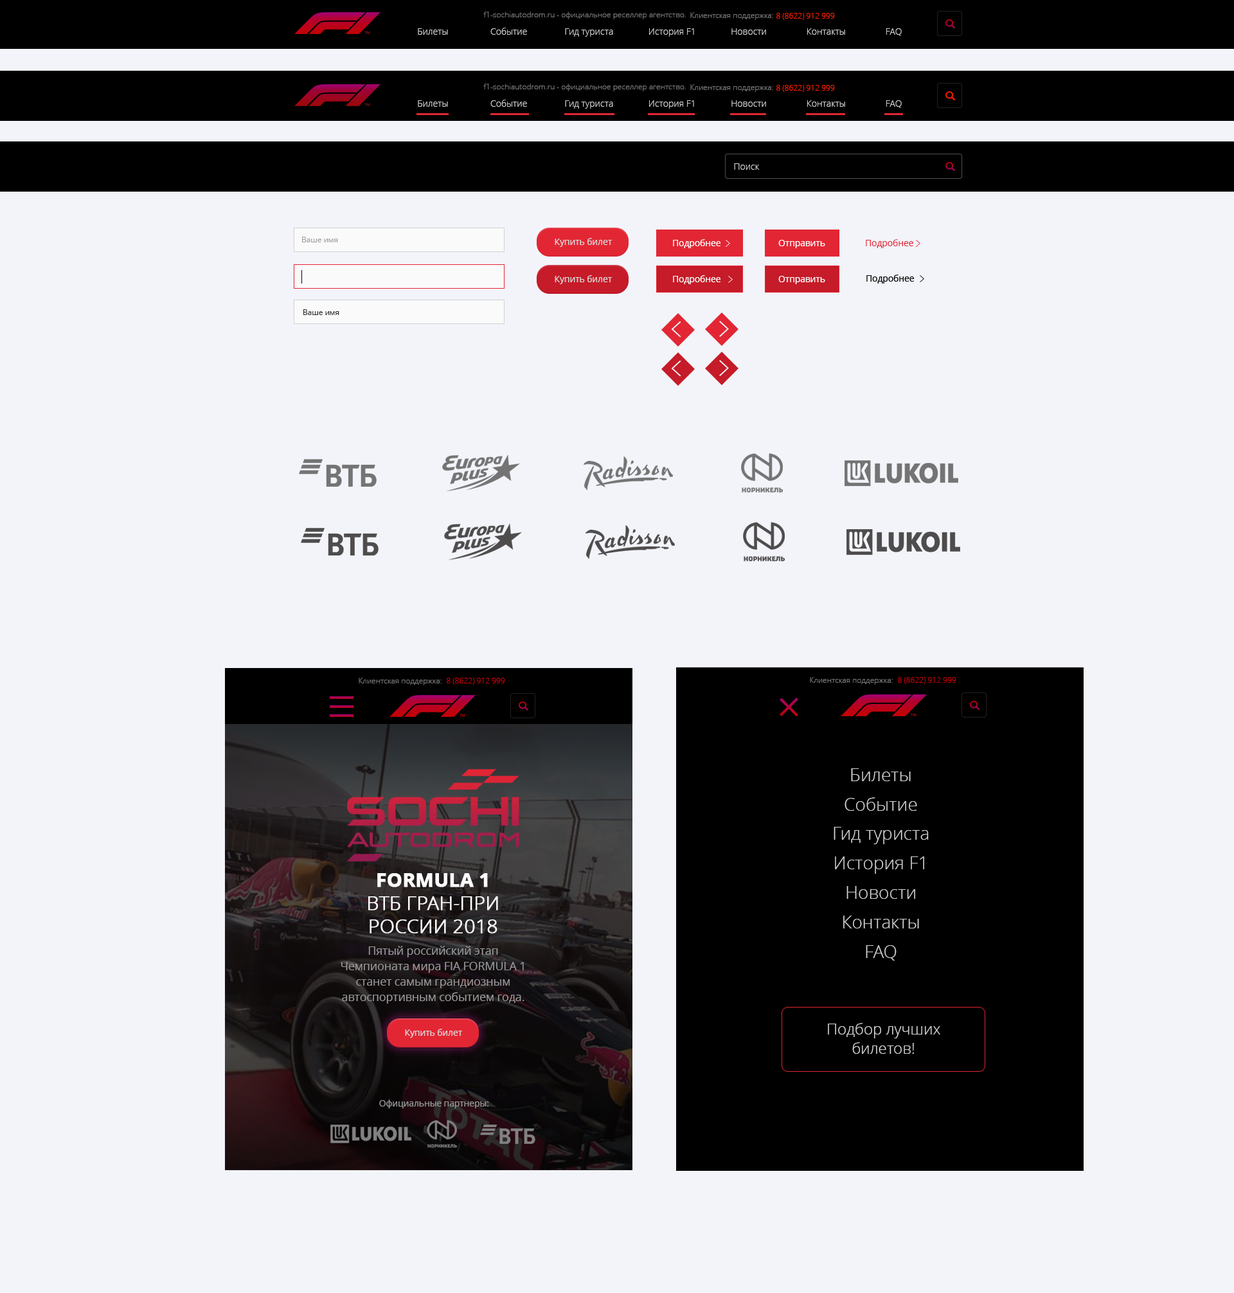
<style>
.page{position:relative;width:1234px;height:1293px;background:#f2f4fa}
.page>*{position:absolute;margin:0}
.t1{font:7.7px "OpenSans-Light";color:#777677}
.t2{font:7.7px "OpenSans-Light";color:#ff1e00}
.t3{font:9px "OpenSans-Light";color:#d3d3d3}
.t4{font:7.7px "OpenSans";letter-spacing:-0.01em;color:#a1a2a4}
.t5{font:9px "OpenSans";letter-spacing:-0.01em;color:#d9d9d9}
.t6{font:9px "OpenSans";letter-spacing:-0.01em;color:#ffffff}
.t7{font:9px "OpenSans";letter-spacing:-0.01em;color:#e32634}
.t8{font:9px "OpenSans";letter-spacing:-0.01em;color:#000000}
.t9{font:7.7px "OpenSans";letter-spacing:-0.01em;color:#2c2c2c}
.t10{font:7.7px "OpenSans-Light";color:#c10209}
.t11{font:18px/14.7px "OpenSans-Light";color:#d3d3d3}
.t12{font:19.3px/23.1px "OpenSans-Light";letter-spacing:-0.01em;color:#ffffff;font-weight:bold}
.t13{font:19.3px/23.1px "OpenSans-Bold";letter-spacing:-0.01em;color:#ffffff;font-weight:bold}
.t14{font:11.6px/15.4px "OpenSans";letter-spacing:-0.01em;color:#989798}
.t15{font:15.4px/19.3px "OpenSans-Light";color:#d3d3d3}
.t16{font:9px "OpenSans";letter-spacing:-0.01em;color:#989798}
</style>
<div class="page">
<p class="t1" style="left:483px;top:12px;width:203px;height:7px">f1-sochiautodrom.ru - официальное реселлер агентство.</p>
<p class="t1" style="left:690px;top:12px;width:83px;height:8px">Клиентская поддержка:</p>
<p class="t2" style="left:777px;top:13px;width:58px;height:7px">8 (8622) 912 999</p>
<p class="t3" style="left:418px;top:28px;width:484px;height:9px">Билеты                  Событие                Гид туриста               История F1               Новости                 Контакты                 FAQ</p>
<p class="t1" style="left:483px;top:84px;width:203px;height:7px">f1-sochiautodrom.ru - официальное реселлер агентство.</p>
<p class="t1" style="left:690px;top:84px;width:83px;height:8px">Клиентская поддержка:</p>
<p class="t2" style="left:777px;top:85px;width:58px;height:7px">8 (8622) 912 999</p>
<p class="t3" style="left:418px;top:100px;width:484px;height:9px">Билеты                  Событие                Гид туриста               История F1               Новости                 Контакты                 FAQ</p>
<p class="t3" style="left:734px;top:163px;width:26px;height:7px">Поиск</p>
<p class="t4" style="left:302px;top:237px;width:36px;height:5px">Ваше имя</p>
<p class="t5" style="left:555px;top:238px;width:58px;height:9px">Купить билет</p>
<p class="t6" style="left:673px;top:239px;width:48px;height:9px">Подробнее</p>
<p class="t6" style="left:779px;top:240px;width:46px;height:8px">Отправить</p>
<p class="t7" style="left:866px;top:239px;width:48px;height:9px">Подробнее</p>
<p class="t5" style="left:555px;top:275px;width:58px;height:9px">Купить билет</p>
<p class="t6" style="left:673px;top:275px;width:48px;height:9px">Подробнее</p>
<p class="t6" style="left:779px;top:276px;width:46px;height:8px">Отправить</p>
<p class="t8" style="left:867px;top:274px;width:47px;height:10px">Подробнее</p>
<p class="t9" style="left:303px;top:309px;width:36px;height:6px">Ваше имя</p>
<p class="t1" style="left:359px;top:678px;width:83px;height:7px">Клиентская поддержка:</p>
<p class="t10" style="left:447px;top:678px;width:58px;height:7px">8 (8622) 912 999</p>
<p class="t1" style="left:810px;top:677px;width:83px;height:8px">Клиентская поддержка:</p>
<p class="t10" style="left:898px;top:677px;width:59px;height:7px">8 (8622) 912 999</p>
<p class="t11" style="left:834px;top:768px;width:95px;height:192px;text-align:center">Билеты    <br>              <br>Событие     <br>           <br>Гид туриста     <br>          <br>История F1  <br>             <br>Новости      <br>           <br>Контакты     <br>            <br>FAQ</p>
<p class="t12" style="left:368px;top:873px;width:130px;height:60px;text-align:center"><span class="t13">FORMULA 1 <br></span>ВТБ ГРАН-ПРИ <br>РОССИИ 2018</p>
<p class="t14" style="left:341px;top:946px;width:184px;height:58px;text-align:center">Пятый российский этап <br>Чемпионата мира FIA FORMULA 1 <br>станет самым грандиозным <br>автоспортивным событием года.</p>
<p class="t15" style="left:828px;top:1023px;width:113px;height:31px;text-align:center">Подбор лучших <br>билетов!</p>
<p class="t5" style="left:405px;top:1029px;width:58px;height:9px">Купить билет</p>
<p class="t16" style="left:379px;top:1099px;width:110px;height:9px">Официальные партнеры:</p>
</div>
